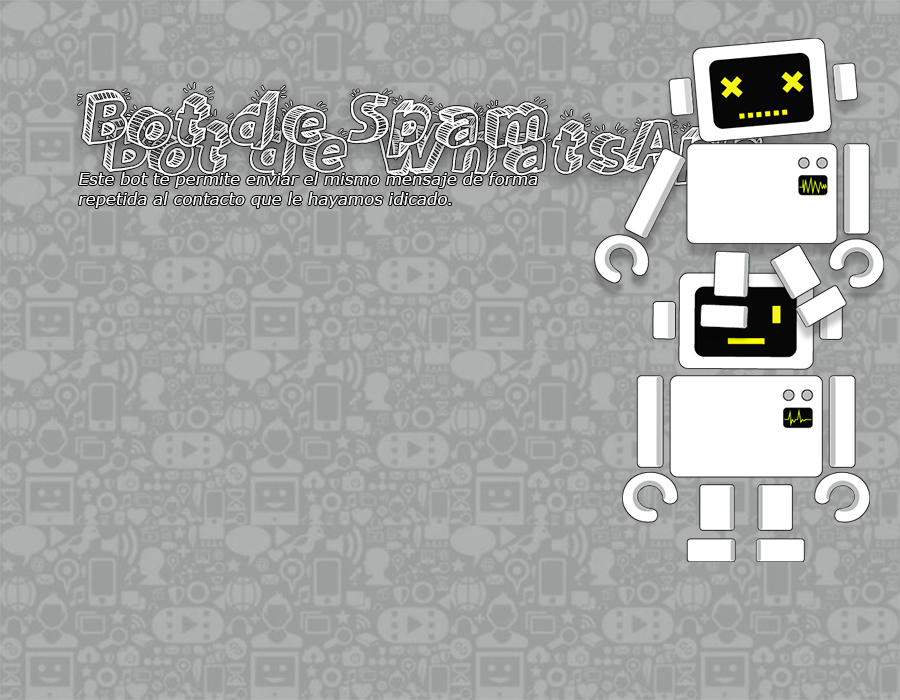
<style>
.page{position:relative;width:900px;height:700px}
.page>*{position:absolute;margin:0}
.t1{font:75px "Sketch3D";color:#ffffff;font-style:italic}
.t2{font:16.7px "Verdana";color:#ffffff;font-style:italic}
</style>
<div class="page">
<p class="t1" style="left:77px;top:83px;width:471px;height:75px">Bot de Spam</p>
<p class="t1" style="left:98px;top:109px;width:666px;height:76px">Bot de WhatsApp</p>
<p class="t2" style="left:79px;top:172px;width:459px;height:36px">Este bot te permite enviar el mismo mensaje de forma <br>repetida al contacto que le hayamos idicado.</p>
</div>
